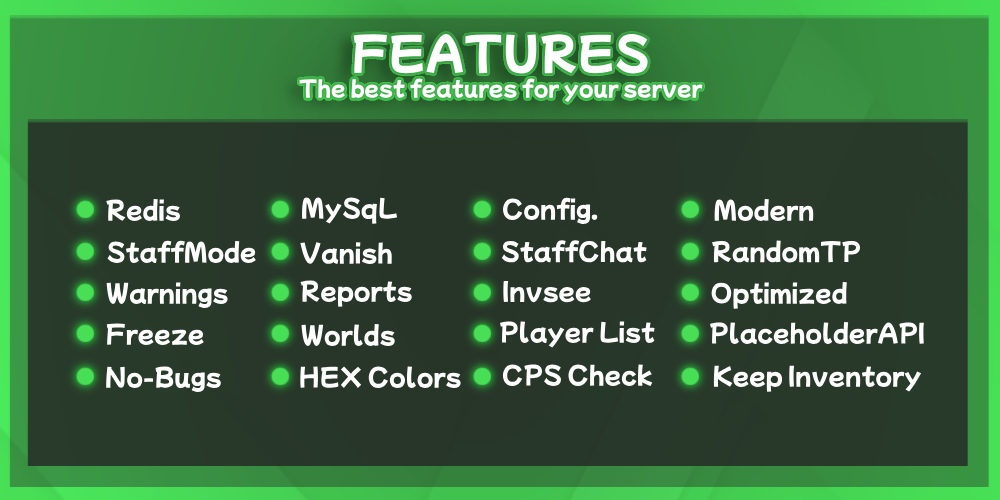
<style>
.page{position:relative;width:1000px;height:500px}
.page>*{position:absolute;margin:0}
.t1{font:21px "MochiyPopOne-Regular";color:#ffffff}
.t2{font:44.1px "MochiyPopOne-Regular";color:#48de56}
.t3{font:44.1px "MochiyPopOne-Regular";color:#ffffff}
.t4{font:24px "MochiyPopOne-Regular";color:#ffffff}
</style>
<div class="page">
<p class="t1" style="left:299px;top:34px;width:404px;height:68px;text-align:center"><span class="t2">F</span><span class="t3">EATURES<br></span>The best features for your server</p>
<p class="t4" style="left:302px;top:197px;width:96px;height:27px">MySqL</p>
<p class="t4" style="left:503px;top:197px;width:95px;height:27px">Config.</p>
<p class="t4" style="left:106px;top:199px;width:75px;height:22px">Redis</p>
<p class="t4" style="left:714px;top:199px;width:100px;height:22px">Modern</p>
<p class="t4" style="left:107px;top:240px;width:149px;height:23px">StaffMode</p>
<p class="t4" style="left:300px;top:242px;width:92px;height:22px">Vanish</p>
<p class="t4" style="left:501px;top:240px;width:146px;height:23px">StaffChat</p>
<p class="t4" style="left:712px;top:240px;width:149px;height:23px">RandomTP</p>
<p class="t4" style="left:300px;top:280px;width:112px;height:27px">Reports</p>
<p class="t4" style="left:503px;top:281px;width:88px;height:22px">Invsee</p>
<p class="t4" style="left:106px;top:282px;width:122px;height:26px">Warnings</p>
<p class="t4" style="left:711px;top:282px;width:136px;height:27px">Optimized</p>
<p class="t4" style="left:106px;top:323px;width:98px;height:22px">Freeze</p>
<p class="t4" style="left:301px;top:324px;width:94px;height:22px">Worlds</p>
<p class="t4" style="left:499px;top:321px;width:156px;height:27px">Player List</p>
<p class="t4" style="left:710px;top:322px;width:214px;height:22px">PlaceholderAPI</p>
<p class="t4" style="left:106px;top:366px;width:115px;height:26px">No-Bugs</p>
<p class="t4" style="left:300px;top:366px;width:161px;height:23px">HEX Colors</p>
<p class="t4" style="left:502px;top:364px;width:151px;height:22px">CPS Check</p>
<p class="t4" style="left:713px;top:365px;width:209px;height:27px">Keep Inventory</p>
</div>
